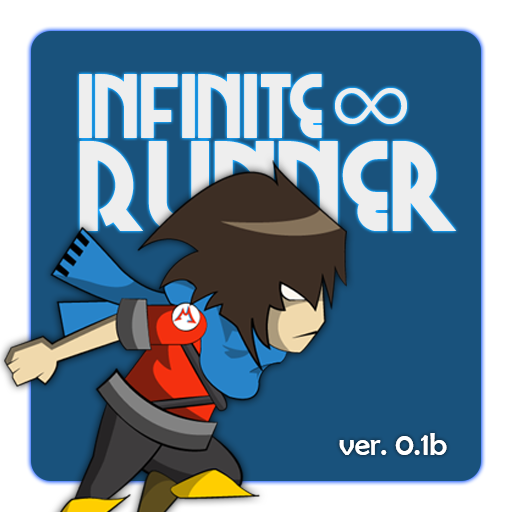
<style>
.page{position:relative;width:512px;height:512px;background:#19527c}
.page>*{position:absolute;margin:0}
.t1{font:87.9px "Chi-TownNF";color:#eeeeee}
.t2{font:120px "OratorStd";color:#ffffff}
.t3{font:123.7px "Chi-TownNF";color:#eeeeee}
.t4{font:31.5px "BerlinSansFB-Reg";color:#ffffff}
</style>
<div class="page">
<p class="t1" style="left:79px;top:74px;width:243px;height:64px">Infinite</p>
<p class="t2" style="left:335px;top:88px;width:72px;height:36px">∞</p>
<p class="t3" style="left:79px;top:141px;width:378px;height:92px">Runner</p>
<p class="t4" style="left:339px;top:433px;width:108px;height:22px">ver. 0.1b</p>
</div>
